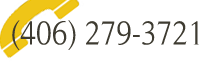
<style>
.page{position:relative;width:218px;height:78px;background:#ffffff}
.page>*{position:absolute;margin:0}
.t1{font:33.9px "RomanSerif";color:#3e3b31;scale:0.89 1}
</style>
<div class="page">
<p class="t1" style="left:12px;top:20px;width:187px;height:30px">(406) 279-3721</p>
</div>
